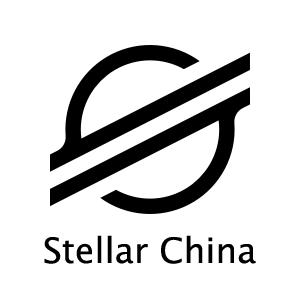
<style>
.page{position:relative;width:300px;height:300px;background:#ffffff}
.page>*{position:absolute;margin:0}
.t1{font:35px "LucidaGrande";color:#000000}
</style>
<div class="page">
<p class="t1" style="left:44px;top:235px;width:212px;height:29px">Stellar China</p>
</div>
